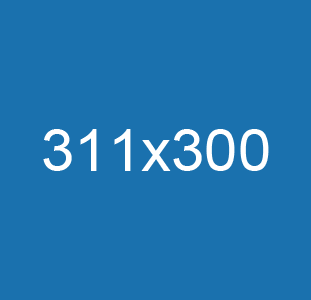
<style>
.page{position:relative;width:311px;height:300px;background:#1a71ae}
.page>*{position:absolute;margin:0}
.t1{font:60px "ArialMT";color:#ffffff}
</style>
<div class="page">
<p class="t1" style="left:43px;top:129px;width:226px;height:42px">311x300</p>
</div>
